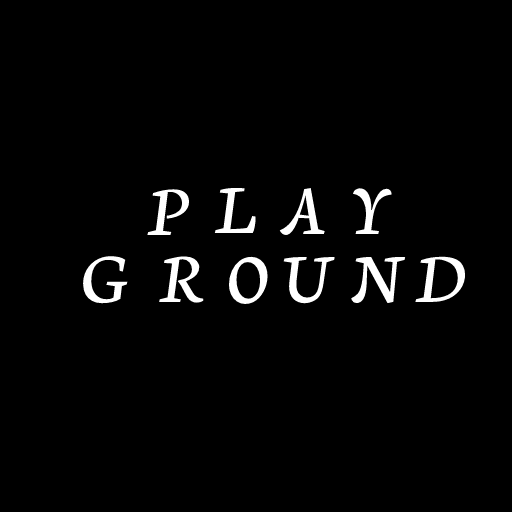
<style>
.page{position:relative;width:512px;height:512px;background:#000000}
.page>*{position:absolute;margin:0}
.t1{font:74.1px "NeutonCursive-Regular";color:#ffffff}
</style>
<div class="page">
<p class="t1" style="left:147px;top:189px;width:43px;height:46px">P</p>
<p class="t1" style="left:214px;top:187px;width:42px;height:47px">L</p>
<p class="t1" style="left:279px;top:188px;width:46px;height:48px">A</p>
<p class="t1" style="left:352px;top:188px;width:40px;height:46px">Y</p>
<p class="t1" style="left:83px;top:256px;width:45px;height:48px">G</p>
<p class="t1" style="left:159px;top:256px;width:45px;height:47px">R</p>
<p class="t1" style="left:228px;top:256px;width:40px;height:49px">O</p>
<p class="t1" style="left:283px;top:256px;width:52px;height:48px">U</p>
<p class="t1" style="left:351px;top:256px;width:55px;height:48px">N</p>
<p class="t1" style="left:415px;top:256px;width:51px;height:46px">D</p>
</div>
